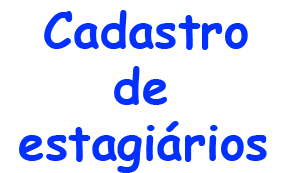
<style>
.page{position:relative;width:289px;height:173px;background:#ffffff}
.page>*{position:absolute;margin:0}
.t1{font:48px "ComicSansMS-Bold";color:#0231ff}
</style>
<div class="page">
<p class="t1" style="left:44px;top:10px;width:204px;height:40px">Cadastro</p>
<p class="t1" style="left:114px;top:66px;width:53px;height:39px">de</p>
<p class="t1" style="left:19px;top:121px;width:248px;height:52px">estagiários</p>
</div>
